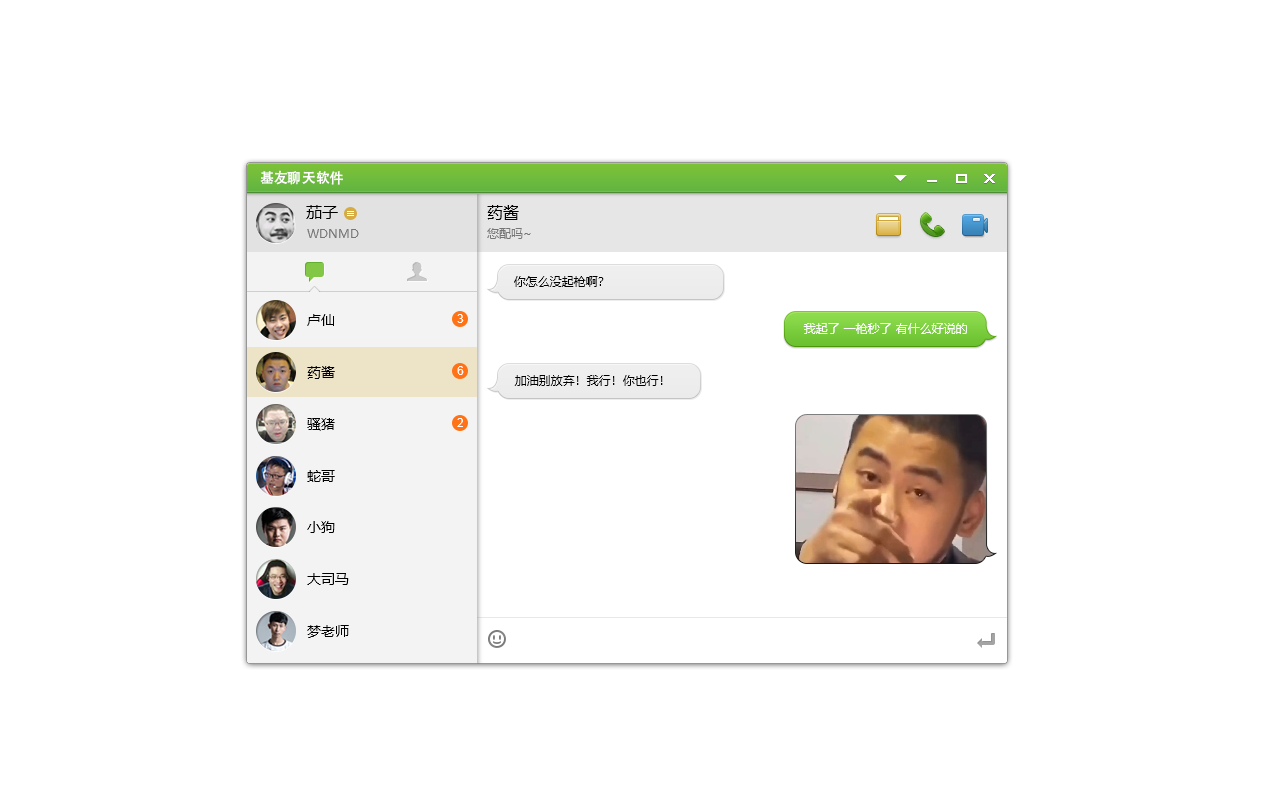
<style>
.page{position:relative;width:1280px;height:800px;background:#ffffff}
.page>*{position:absolute;margin:0}
.t1{font:14px "AdobeHeitiStd-Regular";color:#ffffff}
.t2{font:16px "MicrosoftYaHei";color:#000000}
.t3{font:12px "MicrosoftYaHei";color:#767676}
.t4{font:12px "MicrosoftYaHei";color:#000000}
.t5{font:14px "MicrosoftYaHei";color:#000000}
.t6{font:12px "ArialMT";color:#ffffff}
.t7{font:12px "MicrosoftYaHei";color:#ffffff}
</style>
<div class="page">
<p class="t1" style="left:260px;top:170px;width:83px;height:15px">基友聊天软件</p>
<p class="t2" style="left:306px;top:205px;width:32px;height:14px">茄子</p>
<p class="t2" style="left:487px;top:205px;width:32px;height:15px">药酱</p>
<p class="t3" style="left:307px;top:229px;width:52px;height:9px">WDNMD</p>
<p class="t3" style="left:487px;top:228px;width:44px;height:11px">您配吗~</p>
<p class="t4" style="left:514px;top:276px;width:90px;height:11px">你怎么没起枪啊？</p>
<p class="t5" style="left:307px;top:314px;width:27px;height:12px">卢仙</p>
<p class="t6" style="left:457px;top:314px;width:7px;height:9px">3</p>
<p class="t7" style="left:803px;top:323px;width:164px;height:11px">我起了 一枪秒了 有什么好说的</p>
<p class="t5" style="left:307px;top:366px;width:28px;height:13px">药酱</p>
<p class="t6" style="left:457px;top:366px;width:7px;height:9px">6</p>
<p class="t4" style="left:514px;top:375px;width:149px;height:11px">加油别放弃！我行！你也行！</p>
<p class="t5" style="left:307px;top:418px;width:28px;height:13px">骚猪</p>
<p class="t6" style="left:457px;top:418px;width:6px;height:9px">2</p>
<p class="t5" style="left:307px;top:470px;width:28px;height:12px">蛇哥</p>
<p class="t5" style="left:307px;top:521px;width:28px;height:12px">小狗</p>
<p class="t5" style="left:307px;top:573px;width:42px;height:12px">大司马</p>
<p class="t5" style="left:307px;top:625px;width:42px;height:13px">梦老师</p>
</div>
